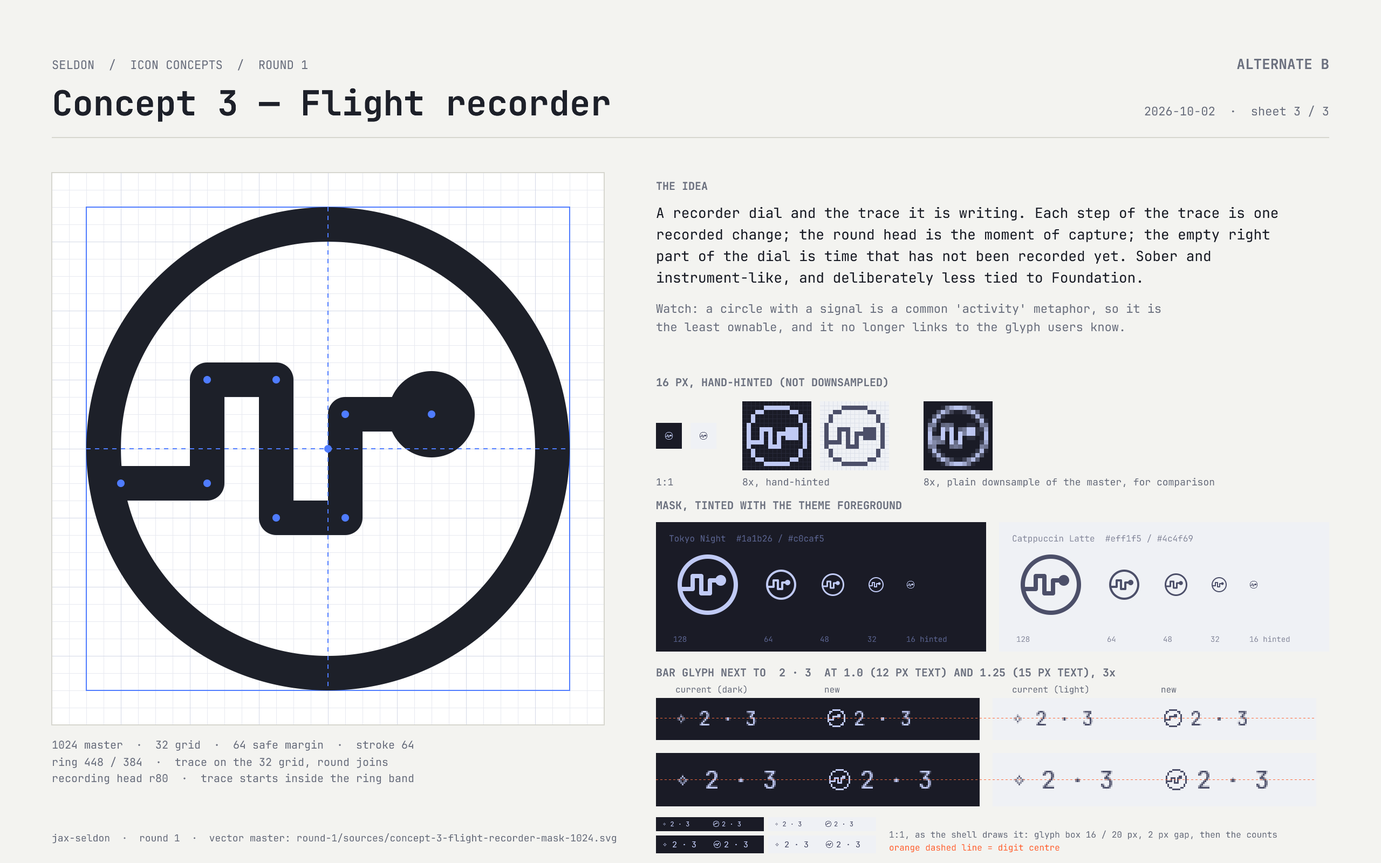
<style>
.page{position:relative;width:1381px;height:863px;background:#f3f3f0}
.page>*{position:absolute;margin:0}
.t1{font:11.9px "JetBrainsMonoNF-Regular";color:#6d7280}
.t2{font:14px "JetBrainsMonoNF-Bold";color:#6d7280}
.t3{font:34.5px "JetBrainsMonoNF-Bold";color:#1d2029}
.t4{font:10.8px "JetBrainsMonoNF-Bold";color:#6d7280}
.t5{font:14px "JetBrainsMonoNF-Regular";color:#1d2029}
.t6{font:9.7px "JetBrainsMonoNF-Regular";color:#6d7280}
.t7{font:8.6px "JetBrainsMonoNF-Regular";color:#565f89}
.t8{font:8.6px "JetBrainsMonoNF-Regular";color:#8c8fa1}
.t9{font:7.6px "JetBrainsMonoNF-Regular";color:#565f89}
.t10{font:7.6px "JetBrainsMonoNF-Regular";color:#8c8fa1}
.t11{font:8.6px "JetBrainsMonoNF-Regular";color:#6d7280}
.t12{font:10.8px "JetBrainsMonoNF-Regular";color:#6d7280}
.t13{font:8.6px "JetBrainsMonoNF-Regular";color:#ff6a3d}
</style>
<div class="page">
<p class="t1" style="left:52px;top:59px;width:256px;height:12px">SELDON  /  ICON CONCEPTS  /  ROUND 1</p>
<p class="t2" style="left:1237px;top:59px;width:92px;height:10px">ALTERNATE B</p>
<p class="t3" style="left:54px;top:88px;width:556px;height:34px">Concept 3 — Flight recorder</p>
<p class="t1" style="left:1145px;top:105px;width:183px;height:12px">2026-10-02  ·  sheet 3 / 3</p>
<p class="t4" style="left:657px;top:182px;width:51px;height:8px">THE IDEA</p>
<p class="t5" style="left:657px;top:207px;width:621px;height:14px">A recorder dial and the trace it is writing. Each step of the trace is one</p>
<p class="t5" style="left:658px;top:228px;width:612px;height:14px">recorded change; the round head is the moment of capture; the empty right</p>
<p class="t5" style="left:657px;top:250px;width:554px;height:14px">part of the dial is time that has not been recorded yet. Sober and</p>
<p class="t5" style="left:657px;top:271px;width:484px;height:14px">instrument-like, and deliberately less tied to Foundation.</p>
<p class="t1" style="left:656px;top:304px;width:505px;height:11px">Watch: a circle with a signal is a common 'activity' metaphor, so it is</p>
<p class="t1" style="left:657px;top:322px;width:467px;height:11px">the least ownable, and it no longer links to the glyph users know.</p>
<p class="t4" style="left:657px;top:377px;width:231px;height:11px">16 PX, HAND-HINTED (NOT DOWNSAMPLED)</p>
<p class="t6" style="left:657px;top:478px;width:16px;height:8px">1:1</p>
<p class="t6" style="left:743px;top:478px;width:86px;height:9px">8x, hand-hinted</p>
<p class="t6" style="left:924px;top:478px;width:291px;height:10px">8x, plain downsample of the master, for comparison</p>
<p class="t4" style="left:657px;top:501px;width:245px;height:10px">MASK, TINTED WITH THE THEME FOREGROUND</p>
<p class="t7" style="left:670px;top:534px;width:154px;height:9px">Tokyo Night  #1a1b26 / #c0caf5</p>
<p class="t8" style="left:1013px;top:534px;width:180px;height:9px">Catppuccin Latte  #eff1f5 / #4c4f69</p>
<p class="t9" style="left:674px;top:636px;width:13px;height:7px">128</p>
<p class="t9" style="left:765px;top:636px;width:8px;height:7px">64</p>
<p class="t9" style="left:821px;top:636px;width:8px;height:7px">48</p>
<p class="t9" style="left:868px;top:636px;width:8px;height:7px">32</p>
<p class="t9" style="left:907px;top:636px;width:40px;height:7px">16 hinted</p>
<p class="t10" style="left:1017px;top:636px;width:13px;height:7px">128</p>
<p class="t10" style="left:1108px;top:636px;width:8px;height:7px">64</p>
<p class="t10" style="left:1164px;top:636px;width:8px;height:7px">48</p>
<p class="t10" style="left:1211px;top:636px;width:8px;height:7px">32</p>
<p class="t10" style="left:1250px;top:636px;width:40px;height:7px">16 hinted</p>
<p class="t4" style="left:657px;top:667px;width:458px;height:12px">BAR GLYPH NEXT TO  2 · 3  AT 1.0 (12 PX TEXT) AND 1.25 (15 PX TEXT), 3x</p>
<p class="t11" style="left:676px;top:685px;width:71px;height:9px">current (dark)</p>
<p class="t11" style="left:825px;top:688px;width:15px;height:5px">new</p>
<p class="t11" style="left:1013px;top:685px;width:75px;height:9px">current (light)</p>
<p class="t11" style="left:1162px;top:688px;width:15px;height:5px">new</p>
<p class="t12" style="left:52px;top:740px;width:361px;height:11px">1024 master  ·  32 grid  ·  64 safe margin  ·  stroke 64</p>
<p class="t12" style="left:53px;top:757px;width:335px;height:11px">ring 448 / 384  ·  trace on the 32 grid, round joins</p>
<p class="t12" style="left:53px;top:774px;width:361px;height:11px">recording head r80  ·  trace starts inside the ring band</p>
<p class="t6" style="left:52px;top:834px;width:564px;height:10px">jax-seldon  ·  round 1  ·  vector master: round-1/sources/concept-3-flight-recorder-mask-1024.svg</p>
<p class="t11" style="left:890px;top:830px;width:387px;height:10px">1:1, as the shell draws it: glyph box 16 / 20 px, 2 px gap, then the counts</p>
<p class="t13" style="left:890px;top:844px;width:170px;height:8px">orange dashed line = digit centre</p>
</div>
